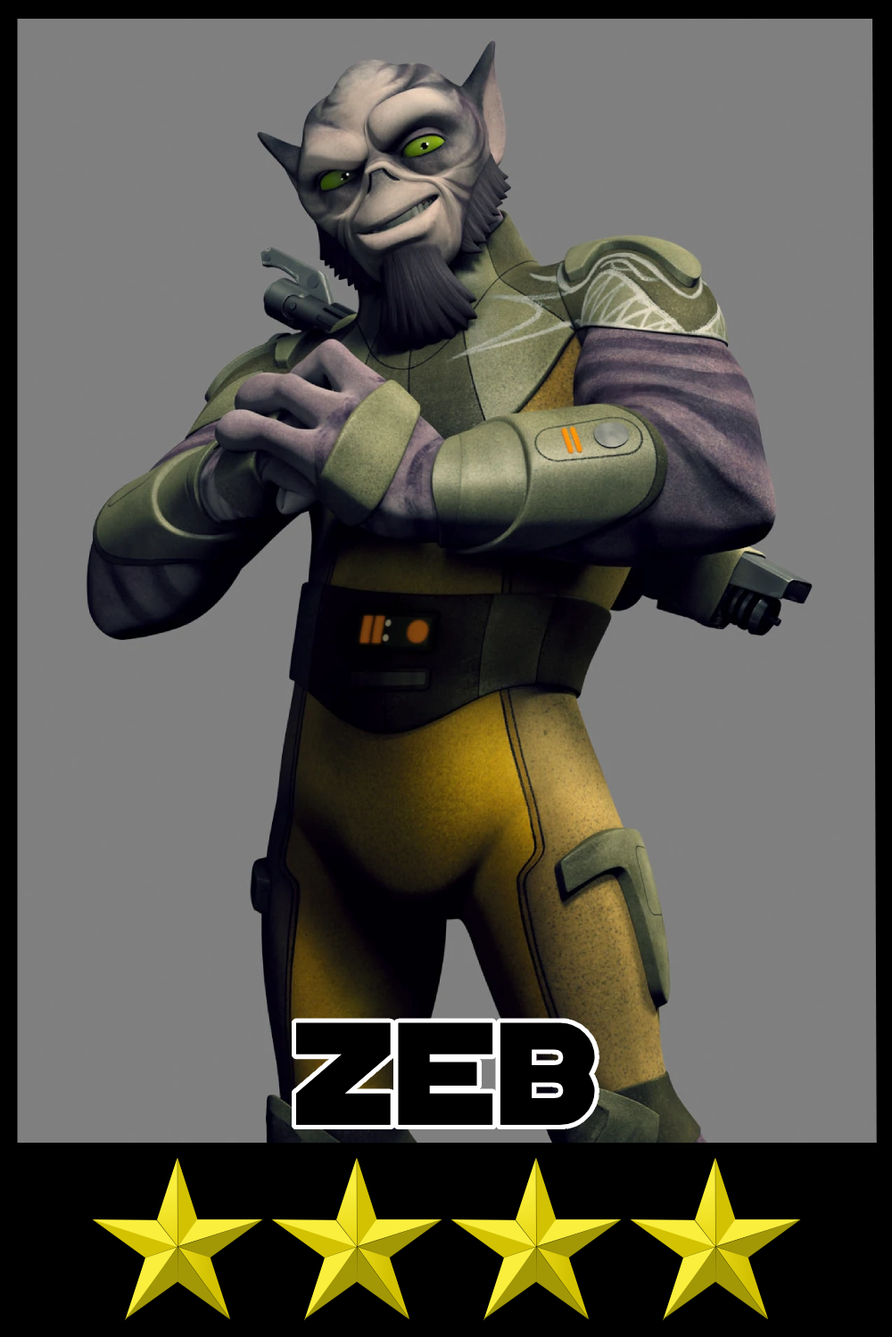
<style>
.page{position:relative;width:892px;height:1337px;background:#7f7f7f}
.page>*{position:absolute;margin:0}
.t1{font:157px "DistantGalaxy";color:#000000}
</style>
<div class="page">
<p class="t1" style="left:296px;top:1023px;width:299px;height:102px">zeb</p>
</div>
